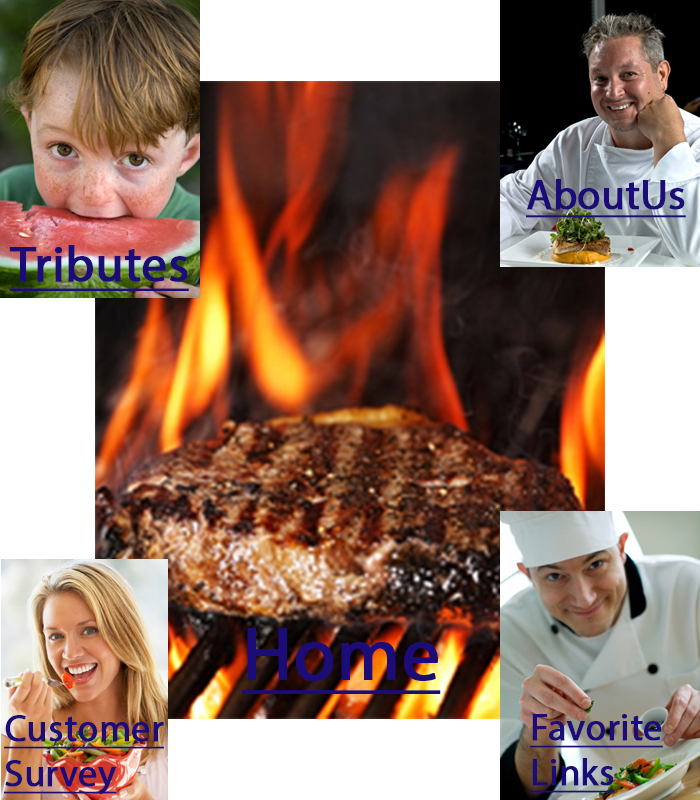
<style>
.page{position:relative;width:700px;height:800px}
.page>*{position:absolute;margin:0}
.t1{font:41.7px "MyriadPro-Regular";color:#1c0c78;font-weight:bold;text-decoration:underline}
.t2{font:50px "MyriadPro-Regular";color:#1c0c78;font-weight:bold;text-decoration:underline}
.t3{font:75px "MyriadPro-Regular";color:#1c0c78;font-weight:bold;text-decoration:underline}
.t4{font:37.5px "MyriadPro-Regular";color:#1c0c78;font-weight:bold;text-decoration:underline}
</style>
<div class="page">
<p class="t1" style="left:526px;top:179px;width:160px;height:39px">AboutUs</p>
<p class="t2" style="left:9px;top:245px;width:180px;height:46px">Tributes</p>
<p class="t3" style="left:242px;top:628px;width:199px;height:66px">Home</p>
<p class="t4" style="left:4px;top:715px;width:161px;height:79px">Customer<br>Survey</p>
<p class="t4" style="left:530px;top:714px;width:133px;height:79px">Favorite<br>Links</p>
</div>
